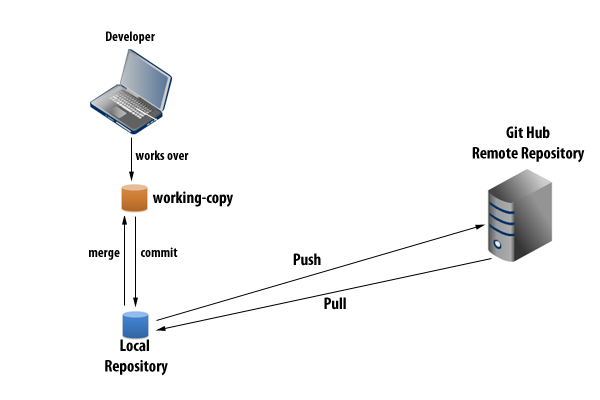
<style>
.page{position:relative;width:600px;height:400px;background:#ffffff}
.page>*{position:absolute;margin:0}
.t1{font:14px "MyriadPro-BoldCond";color:#000000}
.t2{font:17px "MyriadPro-BoldCond";color:#000000}
</style>
<div class="page">
<p class="t1" style="left:106px;top:31px;width:49px;height:13px">Developer</p>
<p class="t2" style="left:472px;top:126px;width:113px;height:37px;text-align:center">Git Hub<br>Remote Repository</p>
<p class="t1" style="left:135px;top:150px;width:54px;height:10px">works over</p>
<p class="t2" style="left:152px;top:191px;width:81px;height:16px">working-copy</p>
<p class="t1" style="left:89px;top:250px;width:31px;height:10px">merge</p>
<p class="t1" style="left:141px;top:247px;width:37px;height:10px">commit</p>
<p class="t2" style="left:293px;top:253px;width:28px;height:13px">Push</p>
<p class="t2" style="left:324px;top:297px;width:22px;height:13px">Pull</p>
<p class="t2" style="left:105px;top:339px;width:63px;height:37px;text-align:center">Local <br>Repository</p>
</div>
